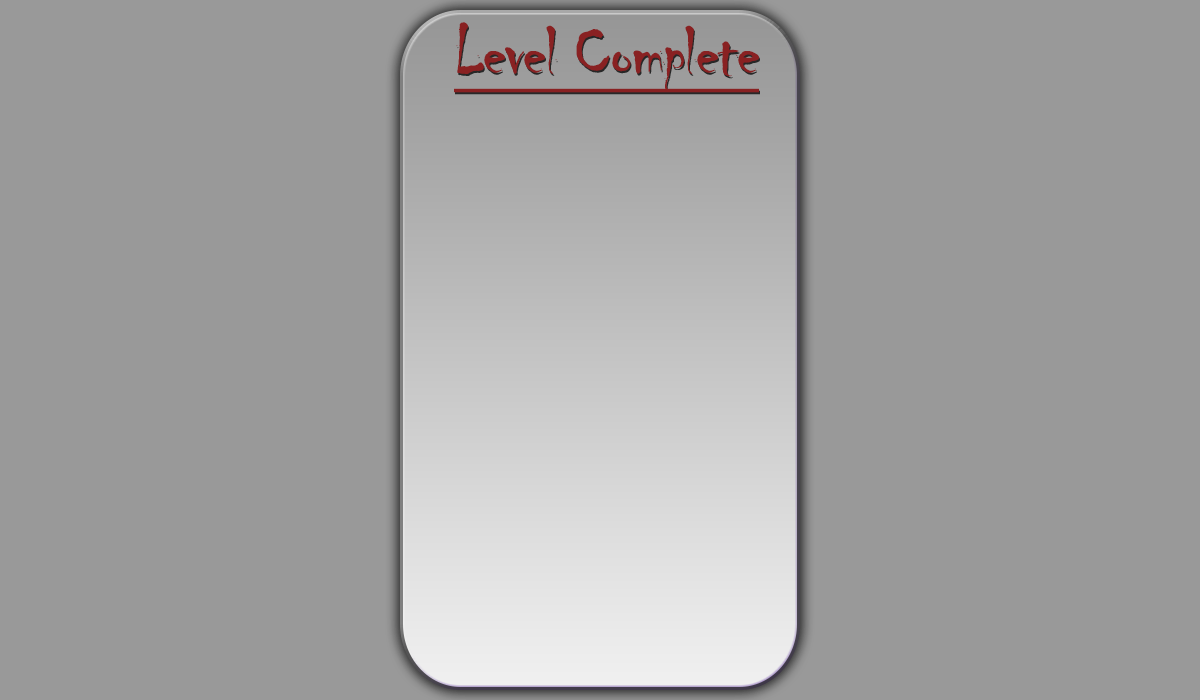
<style>
.page{position:relative;width:1200px;height:700px;background:#999999}
.page>*{position:absolute;margin:0}
.t1{font:71.8px "Chiller-Regular";letter-spacing:-0.025em;color:#892122;text-decoration:underline}
</style>
<div class="page">
<p class="t1" style="left:454px;top:22px;width:305px;height:71px">Level Complete</p>
</div>
